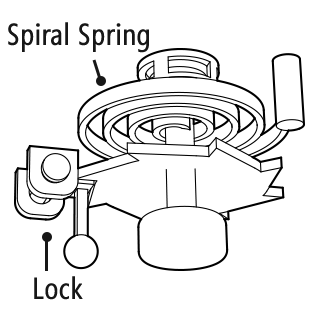
<style>
.page{position:relative;width:320px;height:320px;background:#ffffff}
.page>*{position:absolute;margin:0}
.t1{font:30px "SegoeCondensed";color:#171717;font-weight:bold}
</style>
<div class="page">
<p class="t1" style="left:8px;top:22px;width:141px;height:31px">Spiral Spring</p>
<p class="t1" style="left:34px;top:276px;width:49px;height:24px">Lock</p>
</div>
